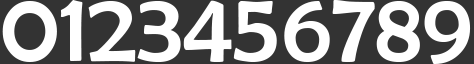
<style>
.page{position:relative;width:474px;height:64px;background:#333333}
.page>*{position:absolute;margin:0}
.t1{font:100px "BerlinSansFB-Reg";color:#ffffff}
</style>
<div class="page">
<p class="t1" style="left:2px;top:0px;width:469px;height:64px">0123456789</p>
</div>
